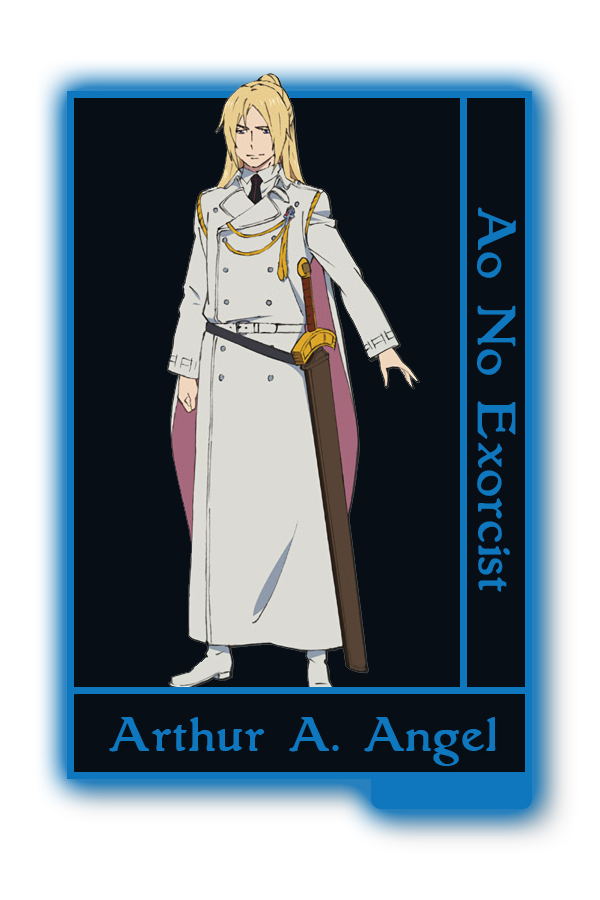
<style>
.page{position:relative;width:600px;height:900px;background:#070e16}
.page>*{position:absolute;margin:0}
.t1{font:48.8px "Grantham-Roman";color:#0f77be}
.t2{font:45.6px "Grantham-Roman";color:#0f77be}
</style>
<div class="page">
<p class="t1" style="left:477px;top:207px;width:39px;height:385px;rotate:90deg">Ao No Exorcist</p>
<p class="t2" style="left:109px;top:717px;width:387px;height:49px">Arthur A. Angel</p>
</div>
